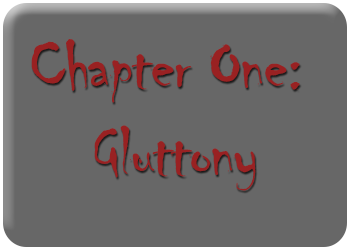
<style>
.page{position:relative;width:350px;height:250px;background:#676767}
.page>*{position:absolute;margin:0}
.t1{font:72.2px "Chiller-Regular";letter-spacing:-0.025em;color:#992122}
</style>
<div class="page">
<p class="t1" style="left:31px;top:39px;width:269px;height:152px;text-align:center">Chapter One: <br>Gluttony</p>
</div>
